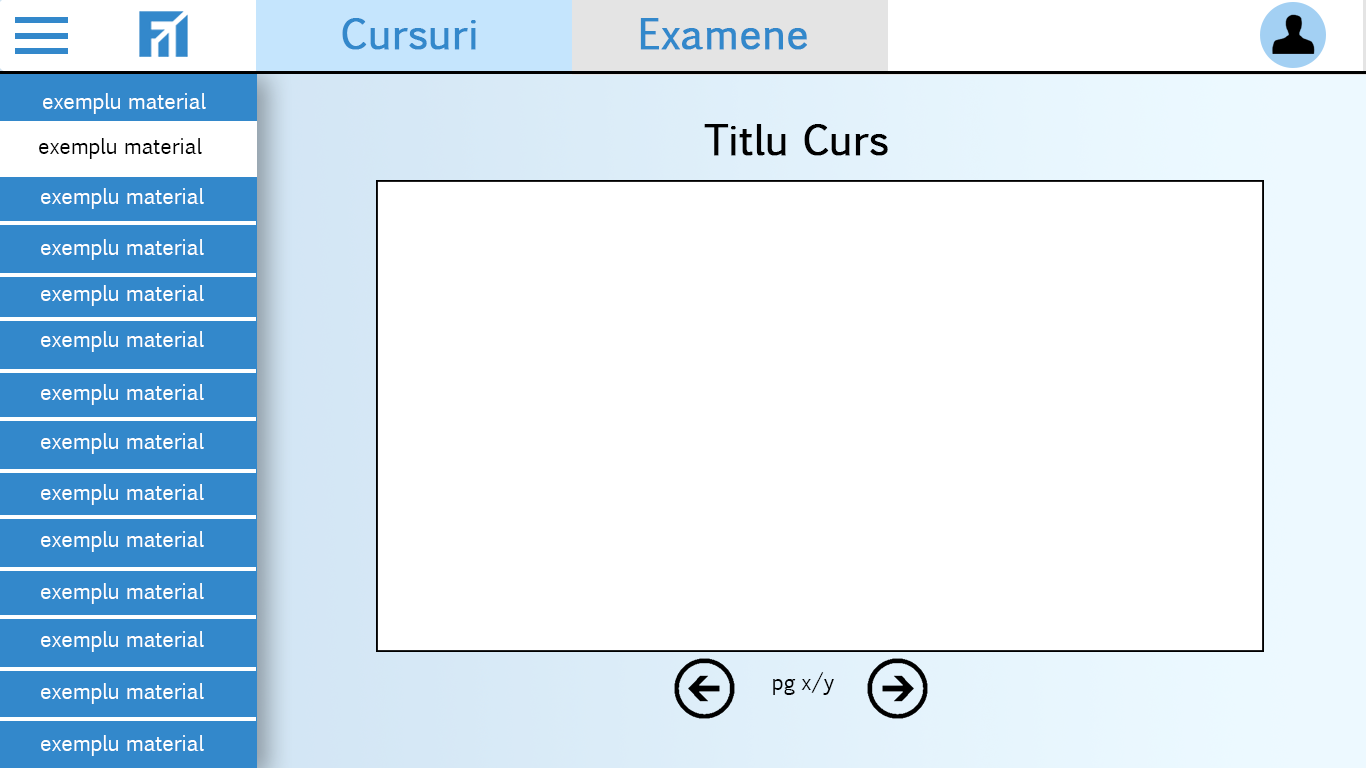
<style>
.page{position:relative;width:1366px;height:768px;background:#ffffff}
.page>*{position:absolute;margin:0}
.t1{font:40px "EuphemiaCAS";color:#3388cb;font-weight:bold}
.t2{font:21px "EuphemiaCAS";color:#ffffff}
.t3{font:40px "EuphemiaCAS";color:#000000;font-weight:bold}
.t4{font:21px "EuphemiaCAS";color:#000000}
.t5{font:21px "EuphemiaCAS";color:#fefefe}
</style>
<div class="page">
<p class="t1" style="left:342px;top:18px;width:134px;height:32px">Cursuri</p>
<p class="t1" style="left:640px;top:18px;width:167px;height:32px">Examene</p>
<p class="t2" style="left:43px;top:93px;width:163px;height:21px">exemplu material</p>
<p class="t3" style="left:704px;top:124px;width:184px;height:32px">Titlu Curs</p>
<p class="t4" style="left:39px;top:138px;width:163px;height:21px">exemplu material</p>
<p class="t2" style="left:41px;top:188px;width:163px;height:21px">exemplu material</p>
<p class="t2" style="left:41px;top:239px;width:163px;height:21px">exemplu material</p>
<p class="t2" style="left:41px;top:285px;width:163px;height:21px">exemplu material</p>
<p class="t2" style="left:41px;top:331px;width:163px;height:21px">exemplu material</p>
<p class="t2" style="left:41px;top:384px;width:163px;height:21px">exemplu material</p>
<p class="t2" style="left:41px;top:433px;width:163px;height:21px">exemplu material</p>
<p class="t2" style="left:41px;top:484px;width:163px;height:21px">exemplu material</p>
<p class="t2" style="left:41px;top:531px;width:163px;height:21px">exemplu material</p>
<p class="t5" style="left:41px;top:583px;width:163px;height:21px">exemplu material</p>
<p class="t2" style="left:41px;top:631px;width:163px;height:21px">exemplu material</p>
<p class="t4" style="left:773px;top:672px;width:61px;height:23px">pg x/y</p>
<p class="t2" style="left:41px;top:683px;width:163px;height:21px">exemplu material</p>
<p class="t2" style="left:41px;top:735px;width:163px;height:21px">exemplu material</p>
</div>
